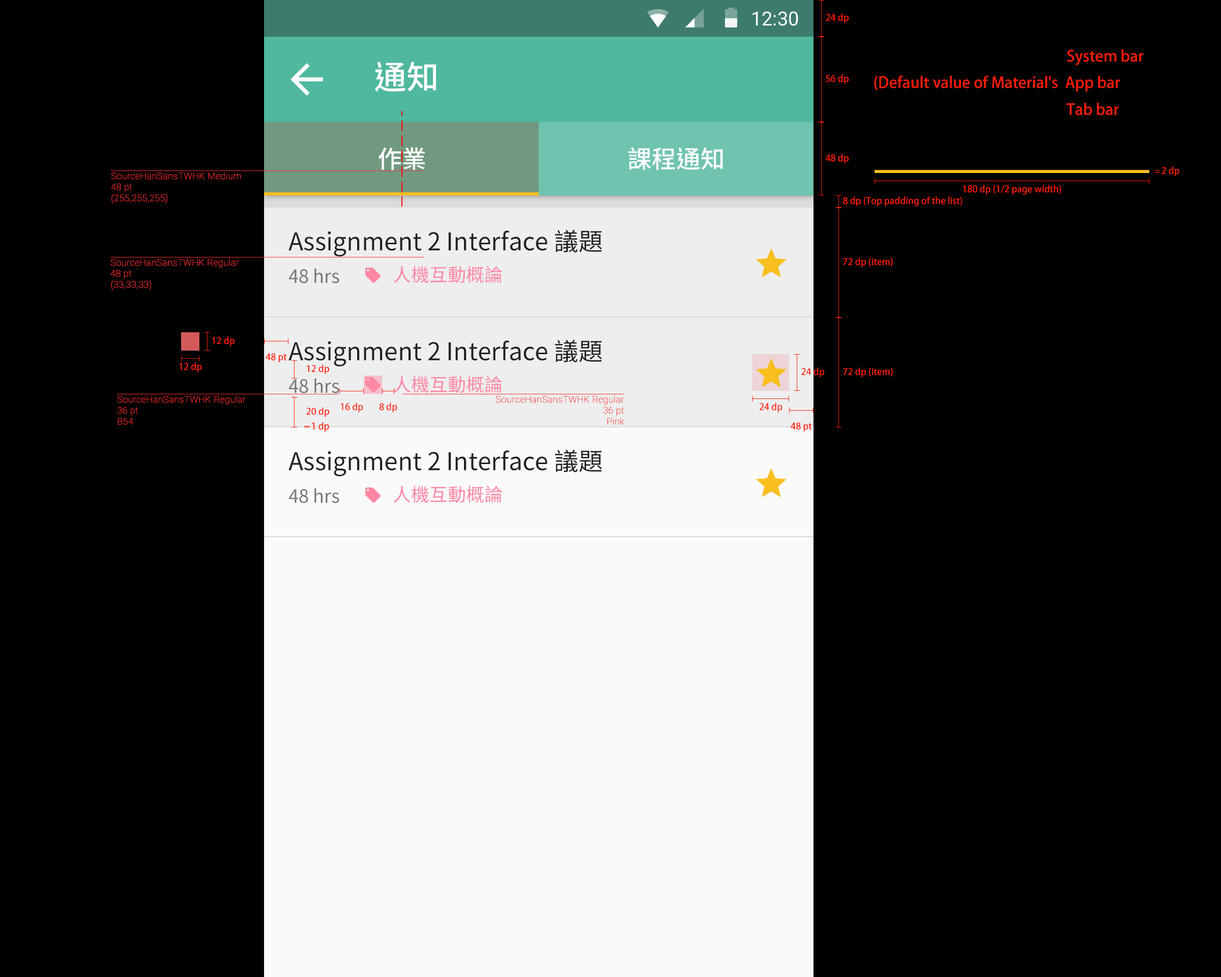
<style>
.page{position:relative;width:1221px;height:977px;background:#000000}
.page>*{position:absolute;margin:0}
.t1{font:19.4px "Roboto-Regular";color:#ffffff}
.t2{font:9.2px "AdobeFanHeitiStd-Bold";color:#ff1e07}
.t3{font:15.3px "AdobeFanHeitiStd-Bold";color:#ff1e07}
.t4{font:32.6px "SourceHanSansTWHK-Medium";color:#ffffff}
.t5{font:24.4px "SourceHanSansTWHK-Medium";color:#ffffff}
.t6{font:9.2px "Roboto-Thin";color:#f83030;font-weight:bold}
.t7{font:24.4px "SourceHanSansTWHK-Regular";color:#212121}
.t8{font:18.3px "SourceHanSansTWHK-Regular";color:#757575}
.t9{font:18.3px "SourceHanSansTWHK-Regular";color:#fe88a4}
</style>
<div class="page">
<p class="t1" style="left:752px;top:11px;width:46px;height:15px">12:30</p>
<p class="t2" style="left:826px;top:13px;width:23px;height:10px">24 dp</p>
<p class="t3" style="left:874px;top:49px;width:270px;height:66px">System bar<br>(Default value of Material's  App bar<br>             Tab bar</p>
<p class="t4" style="left:375px;top:62px;width:61px;height:30px">通知</p>
<p class="t2" style="left:826px;top:74px;width:23px;height:10px">56 dp</p>
<p class="t5" style="left:378px;top:147px;width:47px;height:23px">作業</p>
<p class="t5" style="left:628px;top:147px;width:95px;height:23px">課程通知</p>
<p class="t2" style="left:825px;top:154px;width:24px;height:9px">48 dp</p>
<p class="t6" style="left:111px;top:172px;width:130px;height:31px">SourceHanSansTWHK Medium<br>48 pt<br>(255,255,255)</p>
<p class="t2" style="left:1161px;top:166px;width:18px;height:10px">2 dp</p>
<p class="t2" style="left:963px;top:185px;width:98px;height:10px">180 dp (1/2 page width)</p>
<p class="t2" style="left:843px;top:196px;width:119px;height:11px">8 dp (Top padding of the list)</p>
<p class="t7" style="left:288px;top:229px;width:314px;height:27px">Assignment 2 Interface 議題</p>
<p class="t2" style="left:843px;top:257px;width:50px;height:10px">72 dp (item)</p>
<p class="t6" style="left:110px;top:258px;width:129px;height:32px">SourceHanSansTWHK Regular<br>48 pt<br>(33,33,33)</p>
<p class="t8" style="left:288px;top:268px;width:51px;height:15px">48 hrs</p>
<p class="t9" style="left:393px;top:266px;width:109px;height:17px">人機互動概論</p>
<p class="t2" style="left:212px;top:336px;width:23px;height:10px">12 dp</p>
<p class="t7" style="left:288px;top:339px;width:314px;height:27px">Assignment 2 Interface 議題</p>
<p class="t2" style="left:266px;top:353px;width:21px;height:9px">48 pt</p>
<p class="t2" style="left:179px;top:362px;width:23px;height:10px">12 dp</p>
<p class="t2" style="left:307px;top:364px;width:22px;height:10px">12 dp</p>
<p class="t8" style="left:288px;top:378px;width:51px;height:15px">48 hrs</p>
<p class="t9" style="left:393px;top:375px;width:109px;height:18px">人機互動概論</p>
<p class="t2" style="left:801px;top:367px;width:23px;height:10px">24 dp</p>
<p class="t2" style="left:843px;top:367px;width:50px;height:10px">72 dp (item)</p>
<p class="t6" style="left:117px;top:395px;width:129px;height:30px">SourceHanSansTWHK Regular<br>36 pt<br>B54</p>
<p class="t6" style="left:495px;top:395px;width:129px;height:30px;text-align:right">SourceHanSansTWHK Regular<br>36 pt<br>Pink</p>
<p class="t2" style="left:306px;top:407px;width:23px;height:10px">20 dp</p>
<p class="t2" style="left:340px;top:402px;width:23px;height:10px">16 dp</p>
<p class="t2" style="left:379px;top:402px;width:18px;height:10px">8 dp</p>
<p class="t2" style="left:759px;top:402px;width:23px;height:10px">24 dp</p>
<p class="t2" style="left:312px;top:422px;width:17px;height:9px">1 dp</p>
<p class="t2" style="left:791px;top:422px;width:21px;height:9px">48 pt</p>
<p class="t7" style="left:288px;top:449px;width:314px;height:27px">Assignment 2 Interface 議題</p>
<p class="t9" style="left:393px;top:485px;width:109px;height:18px">人機互動概論</p>
<p class="t8" style="left:288px;top:488px;width:51px;height:15px">48 hrs</p>
</div>
